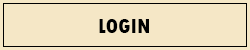
<style>
.page{position:relative;width:250px;height:50px;background:#f5e7c6}
.page>*{position:absolute;margin:0}
.t1{font:22px "TwCenMT-CondensedExtraBold";color:#000000}
</style>
<div class="page">
<p class="t1" style="left:99px;top:19px;width:50px;height:14px">LOGIN</p>
</div>
